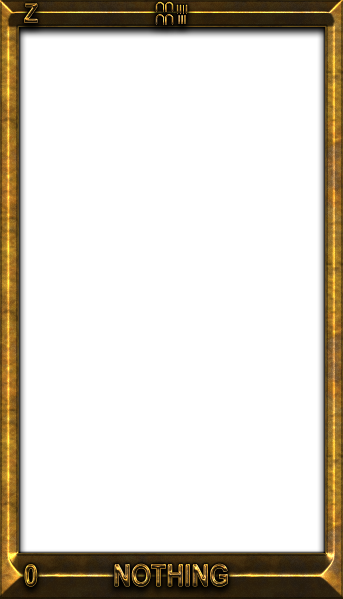
<style>
.page{position:relative;width:343px;height:599px;background:#ffffff}
.page>*{position:absolute;margin:0}
.t1{font:25.9px "Arial-BoldMT";scale:0.84 1}
.t2{font:30px "Arial-BoldMT";scale:0.84 1}
</style>
<div class="page">
<p class="t1" style="left:24px;top:3px;width:14px;height:20px">Z</p>
<p class="t2" style="left:25px;top:564px;width:12px;height:23px">0</p>
<p class="t2" style="left:115px;top:564px;width:113px;height:23px">NOTHING</p>
</div>
